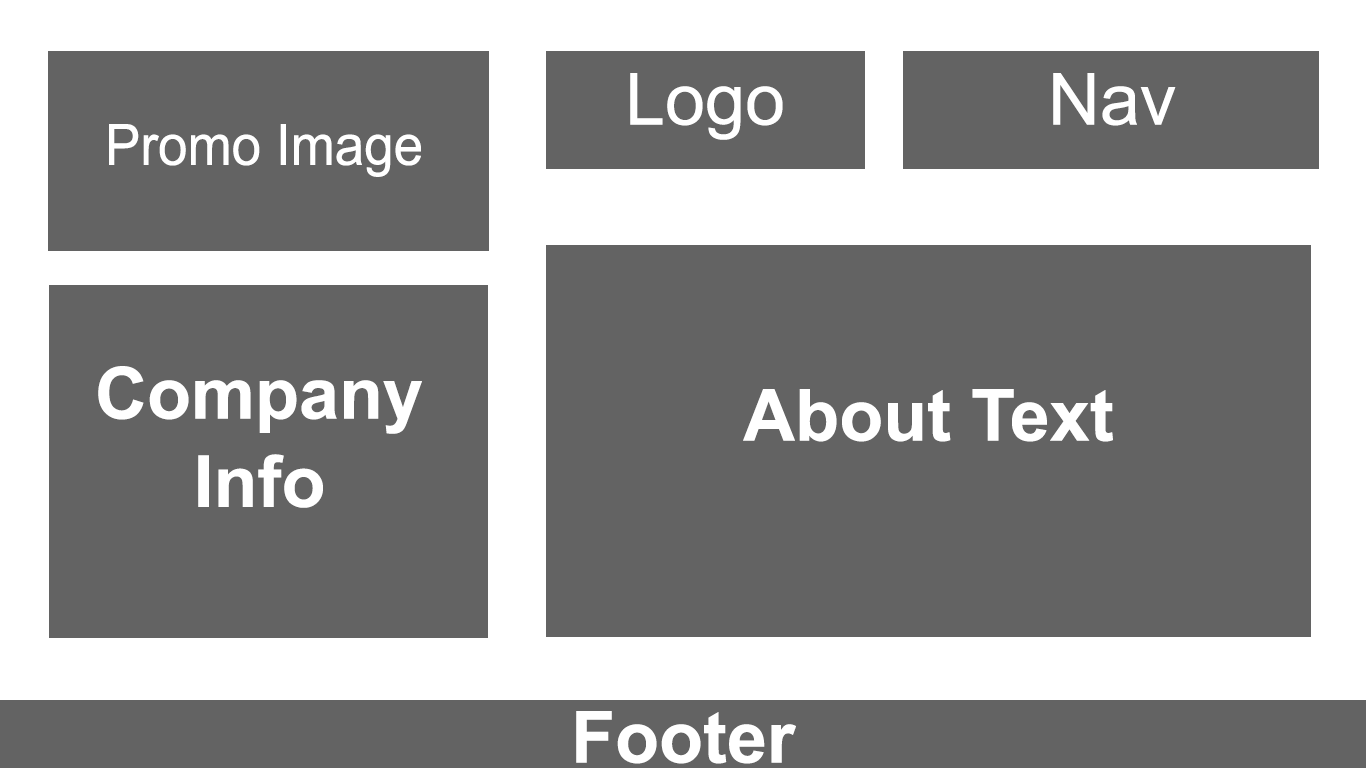
<style>
.page{position:relative;width:1366px;height:768px;background:#636363}
.page>*{position:absolute;margin:0}
.t1{font:72px "ArialMT";color:#ffffff}
.t2{font:56.9px "ArialMT";color:#ffffff;scale:0.93 1}
.t3{font:72px "Arial-BoldMT";color:#ffffff}
</style>
<div class="page">
<p class="t1" style="left:630px;top:73px;width:153px;height:67px">Logo</p>
<p class="t1" style="left:1053px;top:73px;width:123px;height:53px">Nav</p>
<p class="t2" style="left:109px;top:124px;width:312px;height:53px">Promo Image</p>
<p class="t3" style="left:98px;top:366px;width:324px;height:68px">Company</p>
<p class="t3" style="left:743px;top:389px;width:370px;height:53px">About Text</p>
<p class="t3" style="left:198px;top:454px;width:125px;height:54px">Info</p>
<p class="t3" style="left:576px;top:711px;width:220px;height:53px">Footer</p>
</div>
